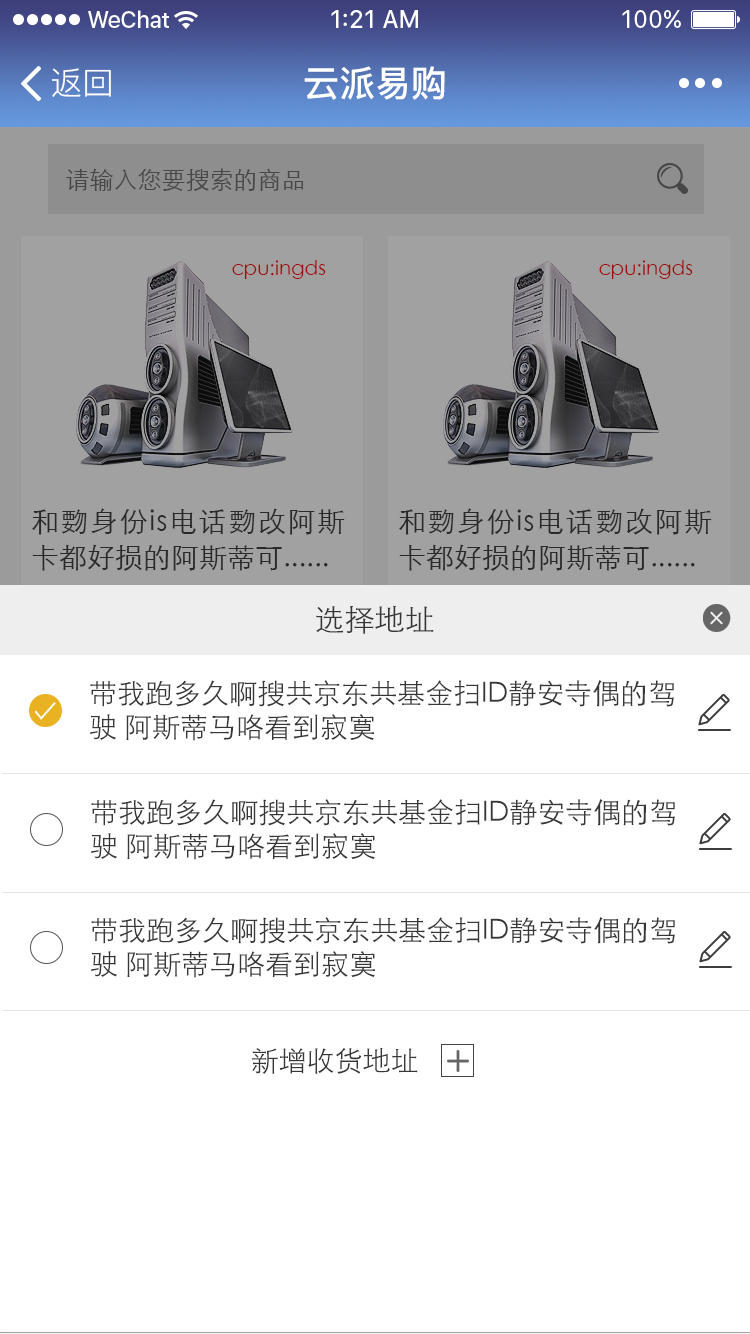
<style>
.page{position:relative;width:750px;height:1334px;background:#ffffff}
.page>*{position:absolute;margin:0}
.t1{font:32px "PingFang-SC-Regular";color:#ffffff}
.t2{font:36px "PingFang-SC-Bold";color:#ffffff}
.t3{font:24px "STXihei";color:#474747}
.t4{font:20px "STXihei";color:#a10b0b}
.t5{font:28px/36px "STXihei";color:#333333}
.t6{font:30px "STXihei";color:#373737}
.t7{font:28px "STXihei";color:#373737}
</style>
<div class="page">
<p class="t1" style="left:52px;top:68px;width:59px;height:29px">返回</p>
<p class="t2" style="left:304px;top:66px;width:141px;height:34px">云派易购</p>
<p class="t3" style="left:66px;top:168px;width:238px;height:23px">请输入您要搜索的商品</p>
<p class="t4" style="left:232px;top:260px;width:94px;height:19px">cpu:ingds</p>
<p class="t4" style="left:599px;top:260px;width:94px;height:19px">cpu:ingds</p>
<p class="t5" style="left:32px;top:508px;width:313px;height:63px;text-align:justify">和覅身份is电话覅改阿斯卡都好损的阿斯蒂可......</p>
<p class="t5" style="left:399px;top:508px;width:313px;height:63px;text-align:justify">和覅身份is电话覅改阿斯卡都好损的阿斯蒂可......</p>
<p class="t6" style="left:316px;top:605px;width:118px;height:29px">选择地址</p>
<p class="t7" style="left:90px;top:680px;width:584px;height:61px">带我跑多久啊搜共京东共基金扫ID静安寺偶的驾驶 阿斯蒂马咯看到寂寞</p>
<p class="t7" style="left:91px;top:799px;width:584px;height:61px">带我跑多久啊搜共京东共基金扫ID静安寺偶的驾驶 阿斯蒂马咯看到寂寞</p>
<p class="t7" style="left:91px;top:917px;width:584px;height:61px">带我跑多久啊搜共京东共基金扫ID静安寺偶的驾驶 阿斯蒂马咯看到寂寞</p>
<p class="t7" style="left:252px;top:1047px;width:166px;height:27px">新增收货地址</p>
</div>
